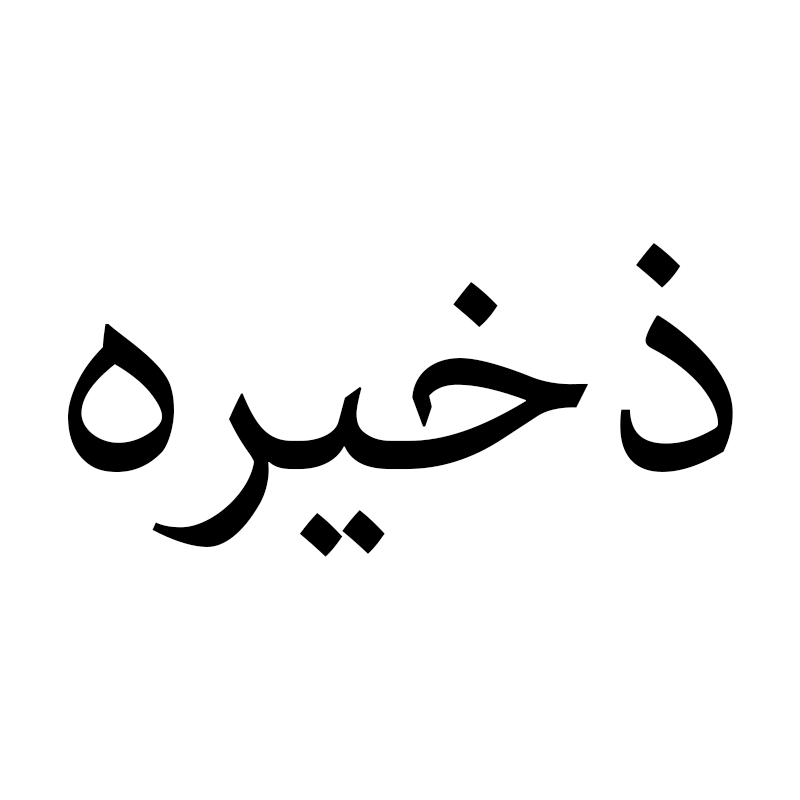
<style>
.page{position:relative;width:800px;height:800px;background:#ffffff}
.page>*{position:absolute;margin:0}
.t1{font:450px "AdobeArabic-Regular";color:#000000}
</style>
<div class="page">
<p class="t1" style="left:68px;top:243px;width:665px;height:314px">ذخیرہ</p>
</div>
